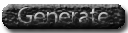
<style>
.page{position:relative;width:128px;height:33px}
.page>*{position:absolute;margin:0}
.t1{font:24px "MyriadPro-Regular"}
</style>
<div class="page">
<p class="t1" style="left:18px;top:7px;width:91px;height:17px">Generate</p>
</div>
